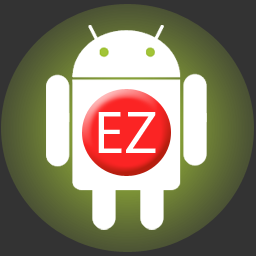
<style>
.page{position:relative;width:256px;height:256px;background:#333333}
.page>*{position:absolute;margin:0}
.t1{font:60px "MyriadPro-Regular";color:#ffffff}
</style>
<div class="page">
<p class="t1" style="left:98px;top:112px;width:58px;height:41px">EZ</p>
</div>
